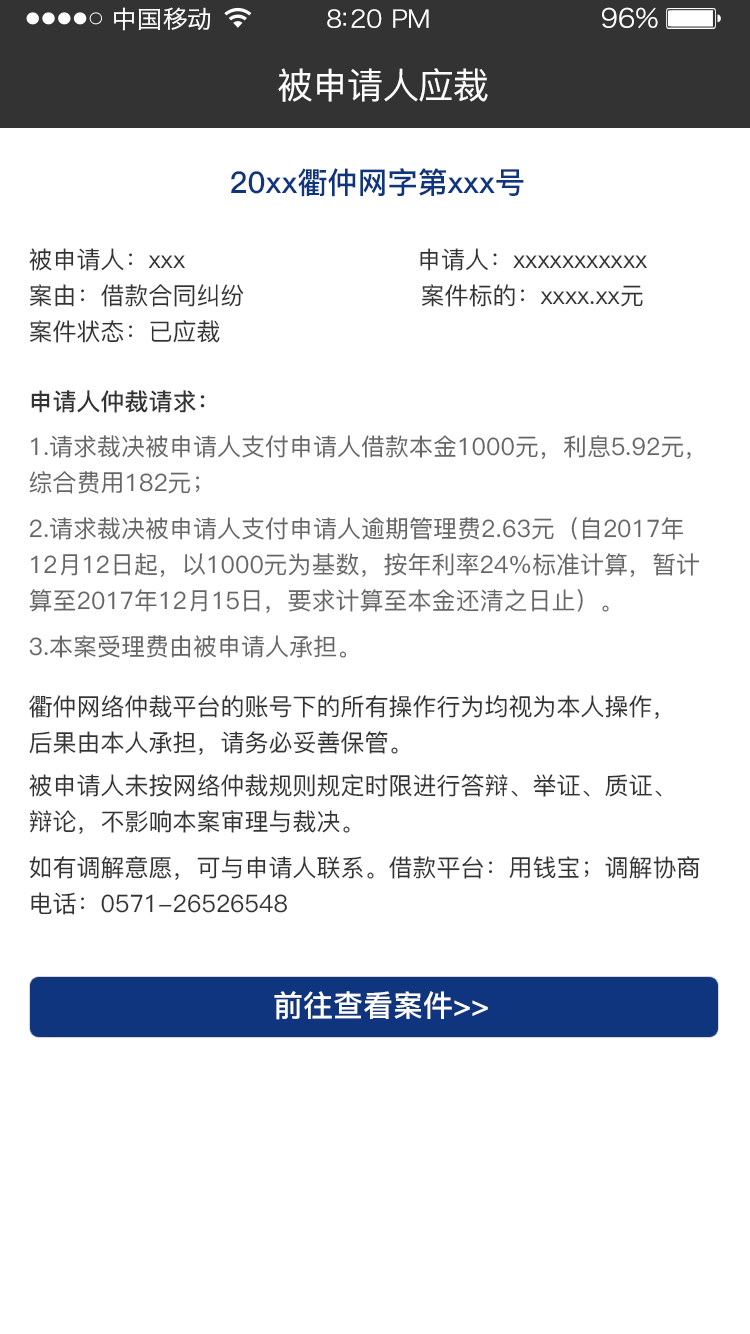
<style>
.page{position:relative;width:750px;height:1334px;background:#ffffff}
.page>*{position:absolute;margin:0}
.t1{font:24px "HiraginoSansGB-W3";letter-spacing:0.02em;color:#ffffff;scale:1.03 1}
.t2{font:24px "HiraginoSansGB-W3";letter-spacing:-0.02em;color:#ffffff;scale:1.03 1}
.t3{font:26.2px "HiraginoSansGB-W3";letter-spacing:-0.02em;color:#ffffff;scale:1.03 1}
.t4{font:36px "PingFang-SC-Medium";letter-spacing:-0.02em;color:#ffffff}
.t5{font:30px "PingFang-SC-Bold";color:#0f357f}
.t6{font:24px/36px "PingFang-SC-Medium";color:#333333}
.t7{font:24px "PingFang-SC-Bold";color:#333333}
.t8{font:24px/36px "PingFang-SC-Medium";color:#666666}
.t9{font:24px "PingFang-SC-Medium";color:#666666}
.t10{font:30px "PingFang-SC-Bold";color:#ffffff}
</style>
<div class="page">
<p class="t1" style="left:114px;top:7px;width:97px;height:24px">中国移动</p>
<p class="t2" style="left:327px;top:9px;width:102px;height:19px">8:20 PM</p>
<p class="t3" style="left:602px;top:7px;width:56px;height:22px">96%</p>
<p class="t4" style="left:278px;top:68px;width:210px;height:34px">被申请人应裁</p>
<p class="t5" style="left:231px;top:168px;width:293px;height:29px">20xx衢仲网字第xxx号</p>
<p class="t6" style="left:29px;top:248px;width:618px;height:95px">被申请人：xxx                             申请人：xxxxxxxxxxx<br>案由：借款合同纠纷                      案件标的：xxxx.xx元<br>案件状态：已应裁</p>
<p class="t7" style="left:31px;top:390px;width:174px;height:23px">申请人仲裁请求：</p>
<p class="t8" style="left:29px;top:435px;width:662px;height:59px">1.请求裁决被申请人支付申请人借款本金1000元，利息5.92元，<br>综合费用182元；</p>
<p class="t8" style="left:29px;top:517px;width:671px;height:96px">2.请求裁决被申请人支付申请人逾期管理费2.63元（自2017年<br>12月12日起，以1000元为基数，按年利率24%标准计算，暂计<br>算至2017年12月15日，要求计算至本金还清之日止）。</p>
<p class="t9" style="left:29px;top:635px;width:318px;height:23px">3.本案受理费由被申请人承担。</p>
<p class="t6" style="left:29px;top:695px;width:630px;height:60px">衢仲网络仲裁平台的账号下的所有操作行为均视为本人操作，<br>后果由本人承担，请务必妥善保管。</p>
<p class="t6" style="left:29px;top:774px;width:633px;height:60px">被申请人未按网络仲裁规则规定时限进行答辩、举证、质证、<br>辩论，不影响本案审理与裁决。</p>
<p class="t6" style="left:29px;top:856px;width:671px;height:59px">如有调解意愿，可与申请人联系。借款平台：用钱宝；调解协商<br>电话：0571-26526548</p>
<p class="t10" style="left:274px;top:991px;width:214px;height:29px">前往查看案件&gt;&gt;</p>
</div>
